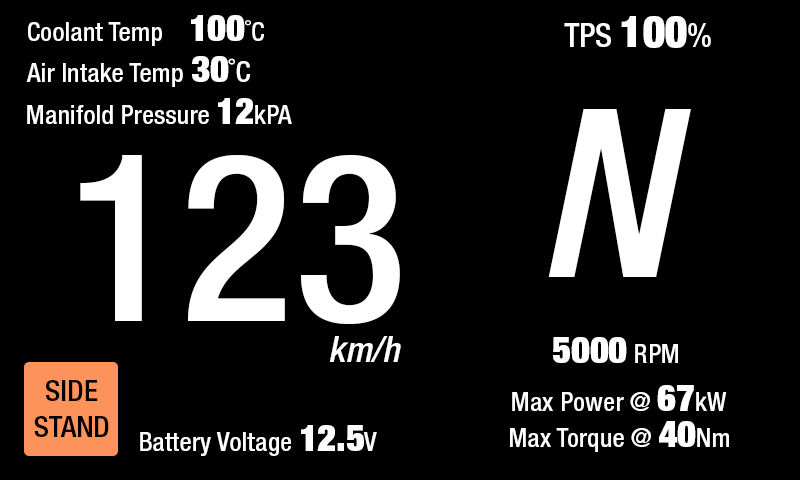
<style>
.page{position:relative;width:800px;height:480px;background:#000000}
.page>*{position:absolute;margin:0}
.t1{font:26.1px "HelveticaNeueLTPro-MdCn";letter-spacing:0.005em;color:#ffffff}
.t2{font:35.9px "HelveticaNeueLTPro-XBlkCn";letter-spacing:0.005em;color:#ffffff}
.t3{font:32.6px "HelveticaNeueLTPro-MdCn";letter-spacing:0.005em;color:#ffffff}
.t4{font:42.4px "HelveticaNeueLTPro-XBlkCn";letter-spacing:0.005em;color:#ffffff}
.t5{font:29.4px "HelveticaNeueLTPro-MdCn";letter-spacing:0.005em;color:#ffffff}
.t6{font:235px "HelveticaNeueLTPro-MdCnO";letter-spacing:0.005em;color:#ffffff}
.t7{font:235px "HelveticaNeueLTPro-MdCn";letter-spacing:0.005em;color:#ffffff}
.t8{font:35.9px "HelveticaNeueLTPro-MdCnO";letter-spacing:0.005em;color:#ffffff}
.t9{font:29.4px "HelveticaNeueLTPro-MdCn";letter-spacing:0.005em;color:#000000}
</style>
<div class="page">
<p class="t1" style="left:28px;top:15px;width:236px;height:31px">Coolant Temp    <span class="t2">100</span>˚C</p>
<p class="t3" style="left:564px;top:16px;width:147px;height:32px">TPS <span class="t4">100</span>%</p>
<p class="t1" style="left:26px;top:56px;width:224px;height:31px">Air Intake Temp <span class="t2">30</span><span class="t5">˚C</span></p>
<p class="t1" style="left:27px;top:98px;width:265px;height:26px">Manifold Pressure <span class="t2">12</span>kPA</p>
<p class="t6" style="left:548px;top:109px;width:143px;height:168px">N</p>
<p class="t7" style="left:80px;top:155px;width:320px;height:169px">123</p>
<p class="t8" style="left:329px;top:336px;width:72px;height:26px">km/h</p>
<p class="t2" style="left:553px;top:337px;width:125px;height:26px">5000<span class="t1"> RPM</span></p>
<p class="t9" style="left:34px;top:380px;width:75px;height:57px;text-align:center">SIDE<br>STAND</p>
<p class="t1" style="left:512px;top:385px;width:215px;height:26px">Max Power @ <span class="t2">67</span>kW</p>
<p class="t1" style="left:140px;top:425px;width:237px;height:31px">Battery Voltage <span class="t2">12.5</span>V</p>
<p class="t1" style="left:510px;top:421px;width:219px;height:31px">Max Torque @ <span class="t2">40</span>Nm</p>
</div>
